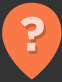
<style>
.page{position:relative;width:62px;height:82px;background:#f97848}
.page>*{position:absolute;margin:0}
.t1{font:48px "Gotham-Bold";color:#fdd6cc}
</style>
<div class="page">
<p class="t1" style="left:20px;top:16px;width:24px;height:35px">?</p>
</div>
